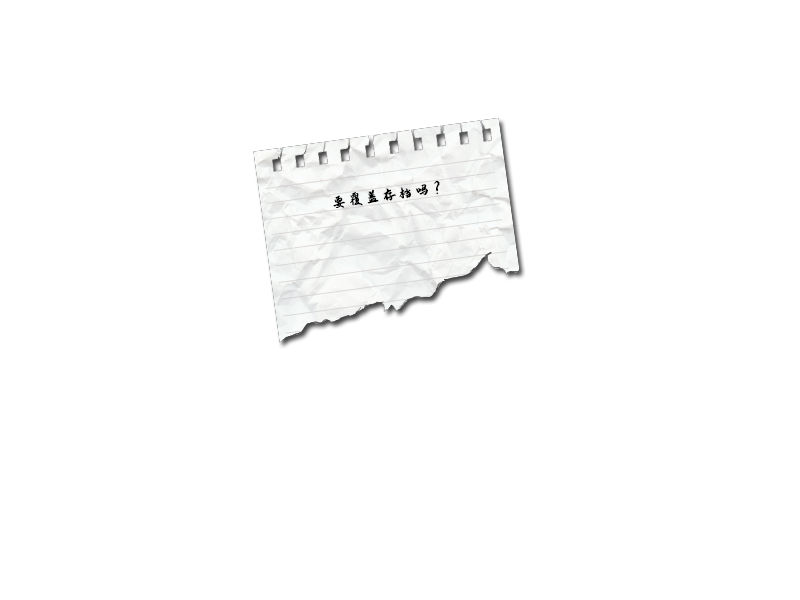
<style>
.page{position:relative;width:800px;height:600px;background:#ffffff}
.page>*{position:absolute;margin:0}
.t1{font:18.8px "slideyouran-Regular";color:#000000}
</style>
<div class="page">
<p class="t1" style="left:333px;top:180px;width:107px;height:28px;rotate:-8deg">要覆盖存档吗?</p>
</div>
